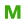
<style>
.page{position:relative;width:24px;height:24px;background:#ffffff}
.page>*{position:absolute;margin:0}
.t1{font:19px "MicrosoftTaiLe-Bold";color:#3ca90b}
</style>
<div class="page">
<p class="t1" style="left:5px;top:5px;width:16px;height:14px">M</p>
</div>
